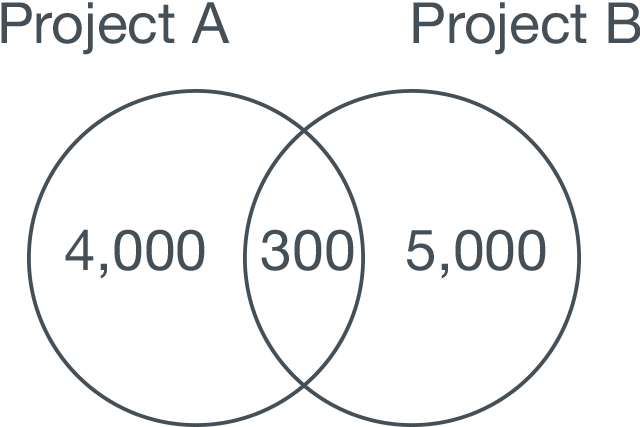
<style>
.page{position:relative;width:640px;height:427px;background:#ffffff}
.page>*{position:absolute;margin:0}
.t1{font:56.9px "HelveticaNeue";color:#444f58}
</style>
<div class="page">
<p class="t1" style="left:1px;top:2px;width:229px;height:53px">Project A</p>
<p class="t1" style="left:413px;top:2px;width:228px;height:53px">Project B</p>
<p class="t1" style="left:65px;top:229px;width:140px;height:50px">4,000</p>
<p class="t1" style="left:261px;top:229px;width:93px;height:42px">300</p>
<p class="t1" style="left:407px;top:229px;width:139px;height:50px">5,000</p>
</div>
